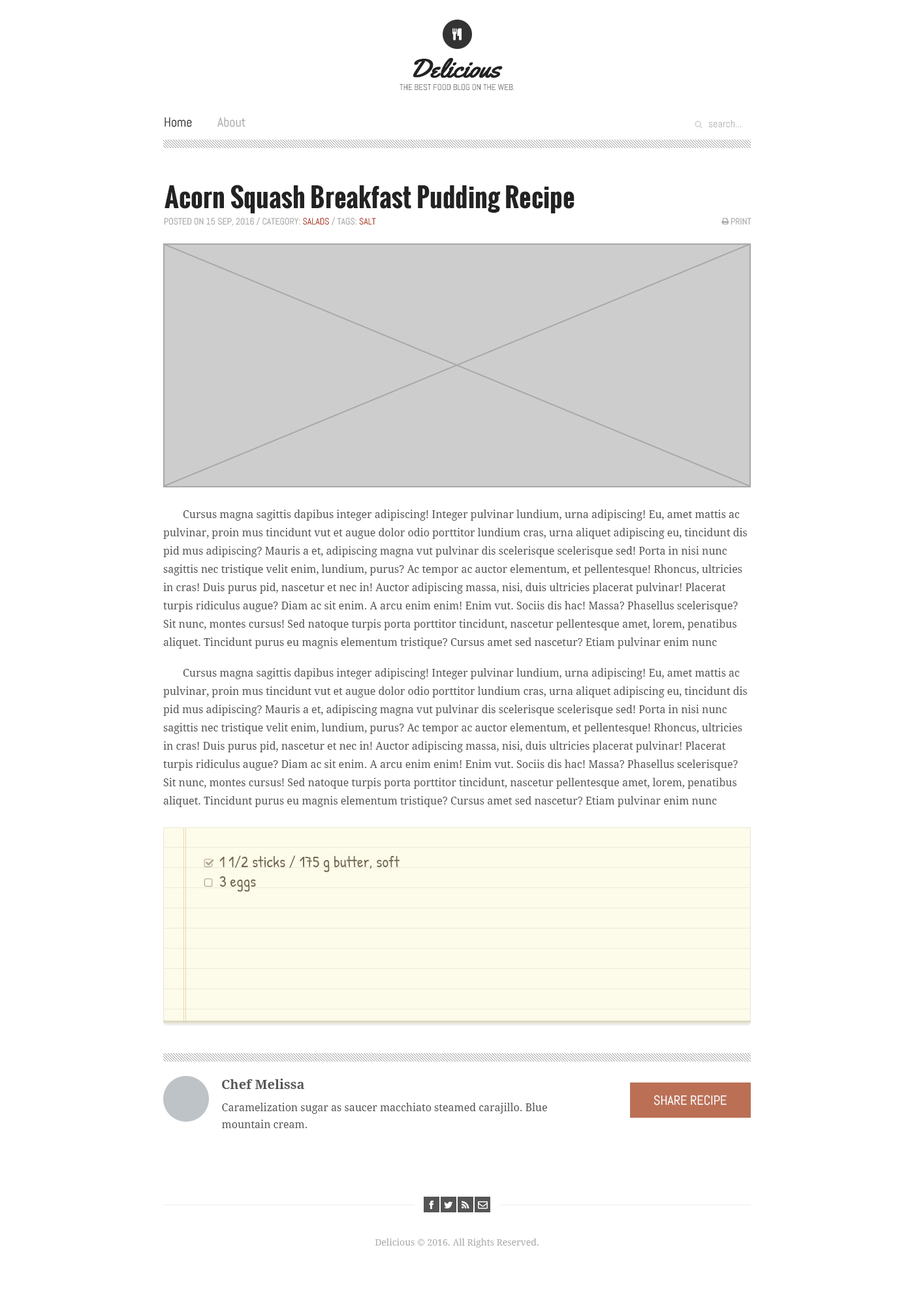
<style>
.page{position:relative;width:914px;height:1305px;background:#ffffff}
.page>*{position:absolute;margin:0}
.t1{font:26.1px "Yellowtail";color:#222222;font-weight:bold}
.t2{font:8.5px "Abel-Regular";color:#555555;text-transform:uppercase}
.t3{font:13.1px "Abel-Regular";color:#222222}
.t4{font:13.1px "Abel-Regular";color:#aaaaaa}
.t5{font:10.4px "Abel-Regular";color:#aaaaaa}
.t6{font:26.1px "Oswald-Bold";color:#222222}
.t7{font:9.1px "Abel-Regular";color:#aaaaaa;text-transform:uppercase}
.t8{font:9.1px "Abel-Regular";color:#b1452e;text-transform:uppercase}
.t9{font:9.1px "Abel-Regular";color:#ababab;text-transform:uppercase}
.t10{font:10.4px/18.3px "DroidSerif";color:#555555}
.t11{font:15.7px "PatrickHand-Regular";color:#71664f}
.t12{font:13.1px "DroidSerif-Bold";color:#555555}
.t13{font:13.1px "Abel-Regular";color:#ffffff;text-transform:uppercase}
.t14{font:10.4px/17px "DroidSerif";color:#555555}
.t15{font:9.1px "DroidSerif";color:#aaaaaa}
</style>
<div class="page">
<p class="t1" style="left:412px;top:57px;width:90px;height:21px">Delicious</p>
<p class="t2" style="left:399px;top:84px;width:115px;height:7px">The best food blog on the web.</p>
<p class="t3" style="left:164px;top:117px;width:28px;height:10px">Home</p>
<p class="t4" style="left:217px;top:117px;width:28px;height:10px">About</p>
<p class="t5" style="left:709px;top:119px;width:32px;height:9px">search...</p>
<p class="t6" style="left:164px;top:185px;width:410px;height:28px">Acorn Squash Breakfast Pudding Recipe</p>
<p class="t7" style="left:164px;top:217px;width:212px;height:9px">Posted On 15 SEP, 2016 / Category: <span class="t8">Salads </span>/ Tags: <span class="t8">Salt</span></p>
<p class="t9" style="left:730px;top:218px;width:21px;height:7px">Print</p>
<p class="t10" style="left:163px;top:510px;width:584px;height:139px">Cursus magna sagittis dapibus integer adipiscing! Integer pulvinar lundium, urna adipiscing! Eu, amet mattis ac pulvinar, proin mus tincidunt vut et augue dolor odio porttitor lundium cras, urna aliquet adipiscing eu, tincidunt dis pid mus adipiscing? Mauris a et, adipiscing magna vut pulvinar dis scelerisque scelerisque sed! Porta in nisi nunc sagittis nec tristique velit enim, lundium, purus? Ac tempor ac auctor elementum, et pellentesque! Rhoncus, ultricies in cras! Duis purus pid, nascetur et nec in! Auctor adipiscing massa, nisi, duis ultricies placerat pulvinar! Placerat turpis ridiculus augue? Diam ac sit enim. A arcu enim enim! Enim vut. Sociis dis hac! Massa? Phasellus scelerisque? Sit nunc, montes cursus! Sed natoque turpis porta porttitor tincidunt, nascetur pellentesque amet, lorem, penatibus aliquet. Tincidunt purus eu magnis elementum tristique? Cursus amet sed nascetur? Etiam pulvinar enim nunc ridiculus, nunc in mauris, turpis magna, sociis ridiculus. Vel nec, adipiscing integer duis dapibus integer ridiculus.</p>
<p class="t10" style="left:163px;top:668px;width:584px;height:139px">Cursus magna sagittis dapibus integer adipiscing! Integer pulvinar lundium, urna adipiscing! Eu, amet mattis ac pulvinar, proin mus tincidunt vut et augue dolor odio porttitor lundium cras, urna aliquet adipiscing eu, tincidunt dis pid mus adipiscing? Mauris a et, adipiscing magna vut pulvinar dis scelerisque scelerisque sed! Porta in nisi nunc sagittis nec tristique velit enim, lundium, purus? Ac tempor ac auctor elementum, et pellentesque! Rhoncus, ultricies in cras! Duis purus pid, nascetur et nec in! Auctor adipiscing massa, nisi, duis ultricies placerat pulvinar! Placerat turpis ridiculus augue? Diam ac sit enim. A arcu enim enim! Enim vut. Sociis dis hac! Massa? Phasellus scelerisque? Sit nunc, montes cursus! Sed natoque turpis porta porttitor tincidunt, nascetur pellentesque amet, lorem, penatibus aliquet. Tincidunt purus eu magnis elementum tristique? Cursus amet sed nascetur? Etiam pulvinar enim nunc ridiculus, nunc in mauris, turpis magna, sociis ridiculus. Vel nec, adipiscing integer duis dapibus integer ridiculus.</p>
<p class="t11" style="left:219px;top:856px;width:180px;height:17px">1 1/2 sticks / 175 g butter, soft</p>
<p class="t11" style="left:220px;top:876px;width:36px;height:16px">3 eggs</p>
<p class="t12" style="left:222px;top:1079px;width:82px;height:10px">Chef Melissa</p>
<p class="t13" style="left:654px;top:1095px;width:72px;height:10px">Share Recipe</p>
<p class="t14" style="left:221px;top:1103px;width:326px;height:25px">Caramelization sugar as saucer macchiato steamed carajillo. Blue mountain cream.</p>
<p class="t15" style="left:375px;top:1239px;width:163px;height:9px">Delicious © 2016. All Rights Reserved.</p>
</div>
